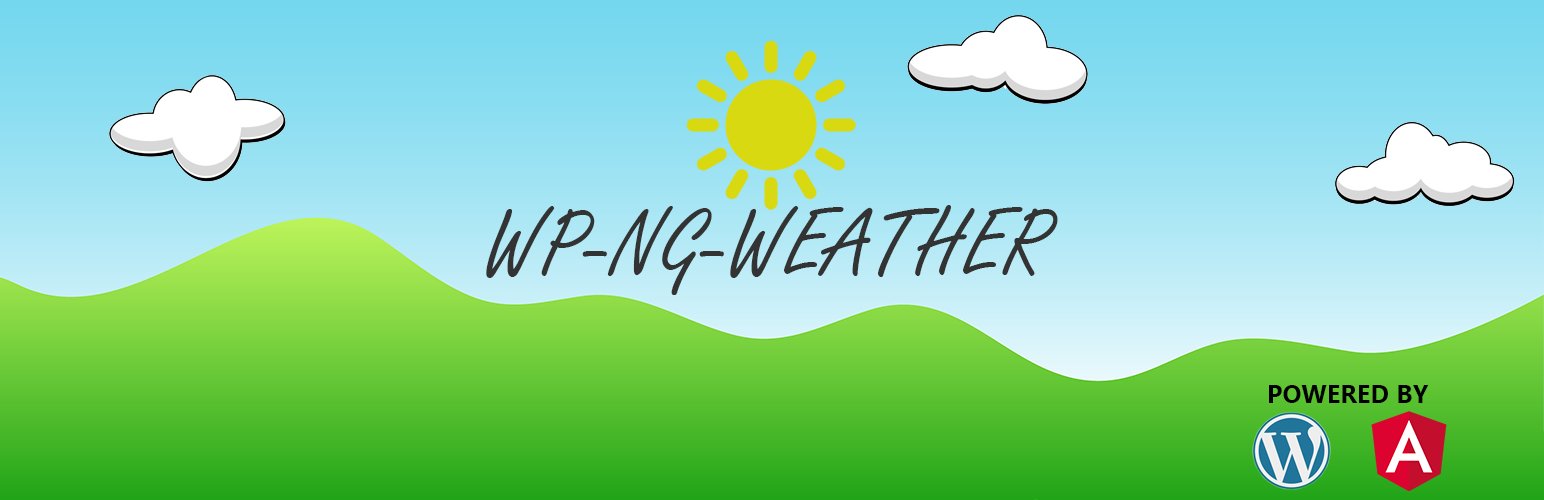
<style>
.page{position:relative;width:1544px;height:500px}
.page>*{position:absolute;margin:0}
.t1{font:100px "FreestyleScript-Regular";letter-spacing:0.01em;color:#333333}
.t2{font:25px "Ebrima-Bold";letter-spacing:0.01em;color:#000000}
</style>
<div class="page">
<p class="t1" style="left:486px;top:205px;width:572px;height:90px">WP-NG-WEATHER</p>
<p class="t2" style="left:1269px;top:385px;width:160px;height:18px">POWERED BY</p>
</div>
